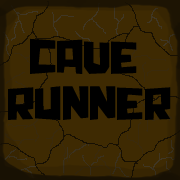
<style>
.page{position:relative;width:180px;height:180px;background:#3e2a02}
.page>*{position:absolute;margin:0}
.t1{font:48px "Chunq";color:#000000}
</style>
<div class="page">
<p class="t1" style="left:30px;top:38px;width:107px;height:36px">cave</p>
<p class="t1" style="left:8px;top:86px;width:163px;height:34px">runner</p>
</div>
